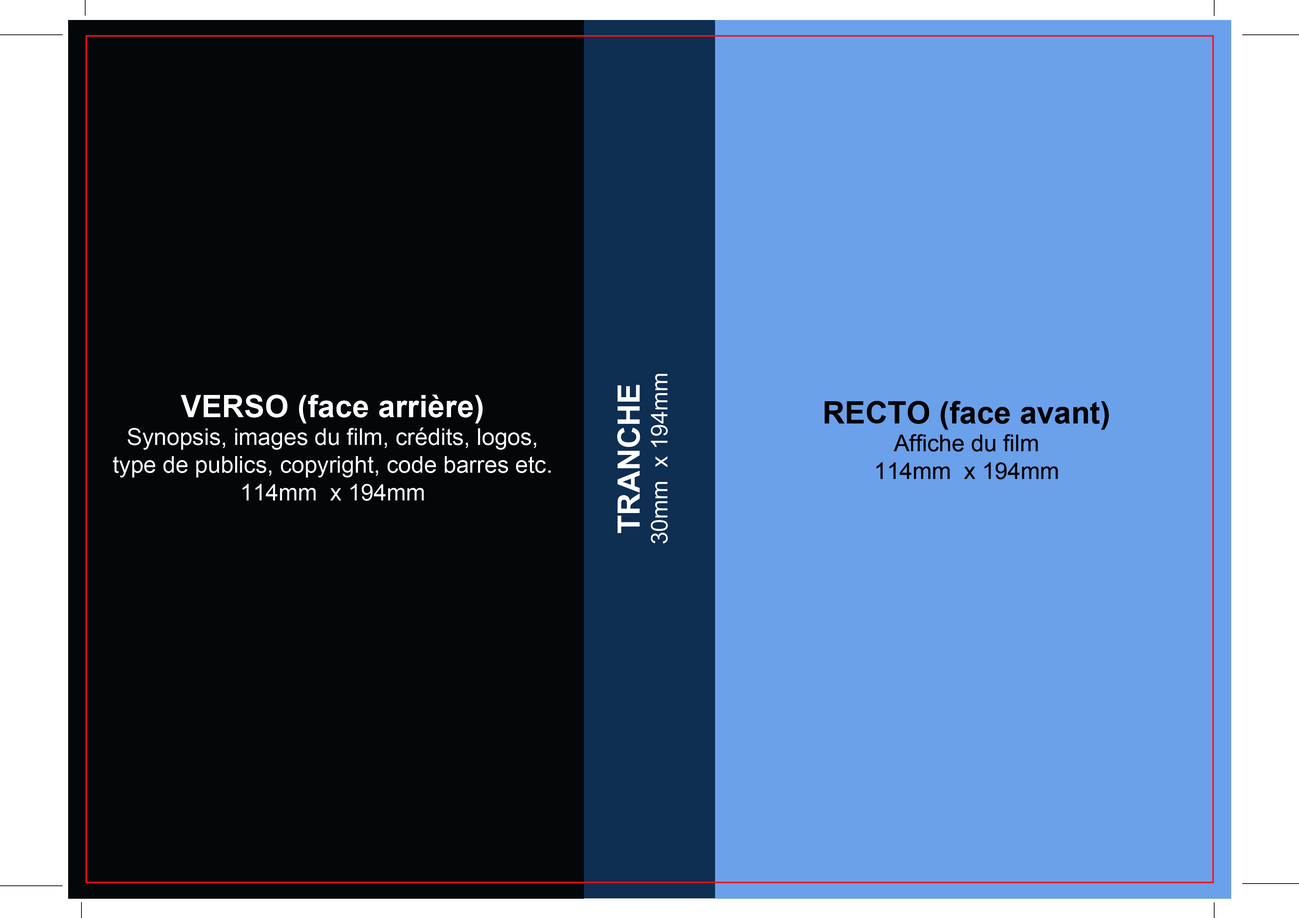
<style>
.page{position:relative;width:1299px;height:918px;background:#6ba0ea}
.page>*{position:absolute;margin:0}
.t1{font:23.1px "ArialMT";color:#ffffff}
.t2{font:30.9px "Arial-BoldMT";color:#ffffff;font-variant:small-caps}
.t3{font:30.9px "Arial-BoldMT";color:#ffffff}
.t4{font:23.1px "ArialMT";color:#010102}
.t5{font:30.9px "Arial-BoldMT";color:#010102;font-variant:small-caps}
.t6{font:30.9px "Arial-BoldMT";color:#010102}
</style>
<div class="page">
<p class="t1" style="left:617px;top:374px;width:51px;height:170px;text-align:center;rotate:-90deg"><span class="t2">TRANCHE<br></span>30mm  x 194mm</p>
<p class="t1" style="left:113px;top:395px;width:438px;height:106px;text-align:center"><span class="t2">VERSO </span><span class="t3">(face arrière)<br></span>Synopsis, images du film, crédits, logos, type de publics, copyright, code barres etc. <br>114mm  x 194mm</p>
<p class="t4" style="left:824px;top:401px;width:285px;height:78px;text-align:center"><span class="t5">RECTO </span><span class="t6">(face avant)<br></span>Affiche du film<br>114mm  x 194mm</p>
</div>
